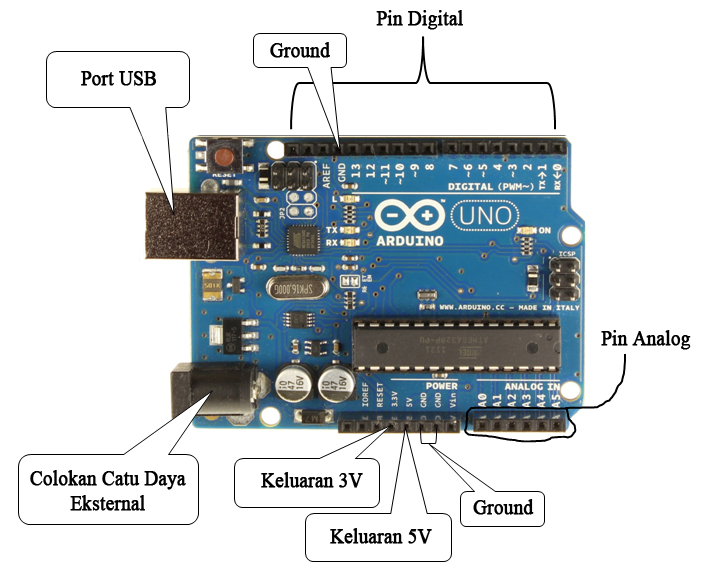
<style>
.page{position:relative;width:702px;height:570px;background:#ffffff}
.page>*{position:absolute;margin:0}
.t1{font:21.1px "TimesNewRomanPSMT";color:#000000;font-weight:bold;scale:0.89 1}
</style>
<div class="page">
<p class="t1" style="left:376px;top:10px;width:87px;height:20px">Pin Digital</p>
<p class="t1" style="left:270px;top:42px;width:60px;height:16px">Ground</p>
<p class="t1" style="left:81px;top:71px;width:76px;height:15px">Port USB</p>
<p class="t1" style="left:601px;top:330px;width:90px;height:20px">Pin Analog</p>
<p class="t1" style="left:30px;top:470px;width:156px;height:41px;text-align:center">Colokan Catu Daya<br>Eksternal</p>
<p class="t1" style="left:261px;top:472px;width:102px;height:16px">Keluaran 3V</p>
<p class="t1" style="left:473px;top:499px;width:61px;height:16px">Ground</p>
<p class="t1" style="left:330px;top:528px;width:102px;height:16px">Keluaran 5V</p>
</div>
